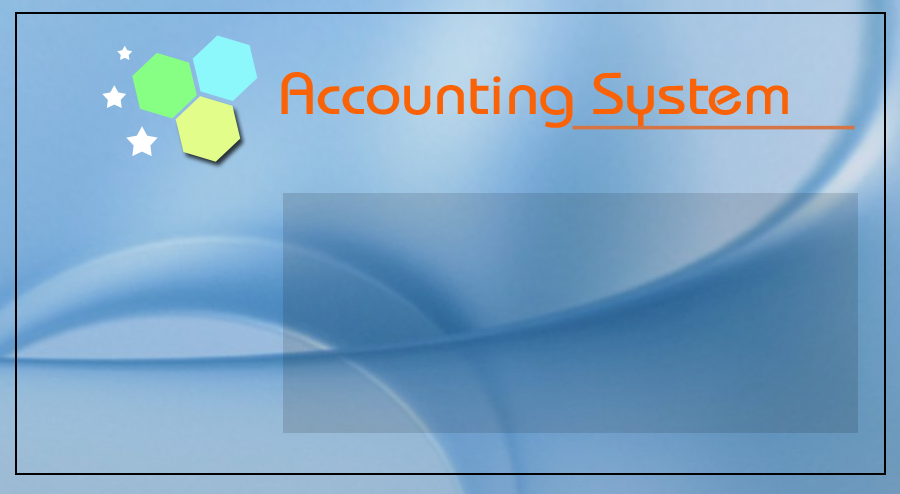
<style>
.page{position:relative;width:900px;height:494px}
.page>*{position:absolute;margin:0}
.t1{font:58.8px "Bauhaus";color:#fa6207;scale:1.1 1}
</style>
<div class="page">
<p class="t1" style="left:281px;top:72px;width:507px;height:56px">Accounting System</p>
</div>
